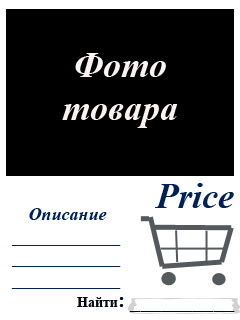
<style>
.page{position:relative;width:240px;height:320px;background:#ffffff}
.page>*{position:absolute;margin:0}
.t1{font:36px "TimesNewRomanPS-BoldItalicMT";color:#fbf2f2}
.t2{font:36px "TimesNewRomanPS-BoldItalicMT";color:#002157}
.t3{font:18px "TimesNewRomanPS-BoldItalicMT";color:#002157}
.t4{font:20.8px "TimesNewRomanPS-BoldMT";color:#020a0f}
.t5{font:14px "TimesNewRomanPS-BoldMT";color:#020a0f}
</style>
<div class="page">
<p class="t1" style="left:62px;top:53px;width:116px;height:75px;text-align:center">Фото<br>товара</p>
<p class="t2" style="left:155px;top:183px;width:79px;height:25px">Price</p>
<p class="t3" style="left:11px;top:208px;width:110px;height:81px;text-align:center">Описание<br>____________<br>____________<br>____________</p>
<p class="t4" style="left:77px;top:297px;width:158px;height:15px"><span class="t5">Найти</span>: __________</p>
</div>
